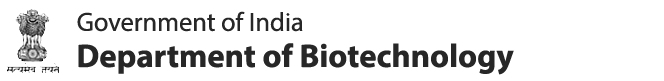
<style>
.page{position:relative;width:664px;height:81px;background:#ffffff}
.page>*{position:absolute;margin:0}
.t1{font:26.3px "MyriadPro-Regular";color:#272727}
.t2{font:32.9px "MyriadPro-Bold";color:#272727}
</style>
<div class="page">
<p class="t1" style="left:77px;top:11px;width:226px;height:21px">Government of India</p>
<p class="t2" style="left:78px;top:43px;width:436px;height:32px">Department of Biotechnology</p>
</div>
